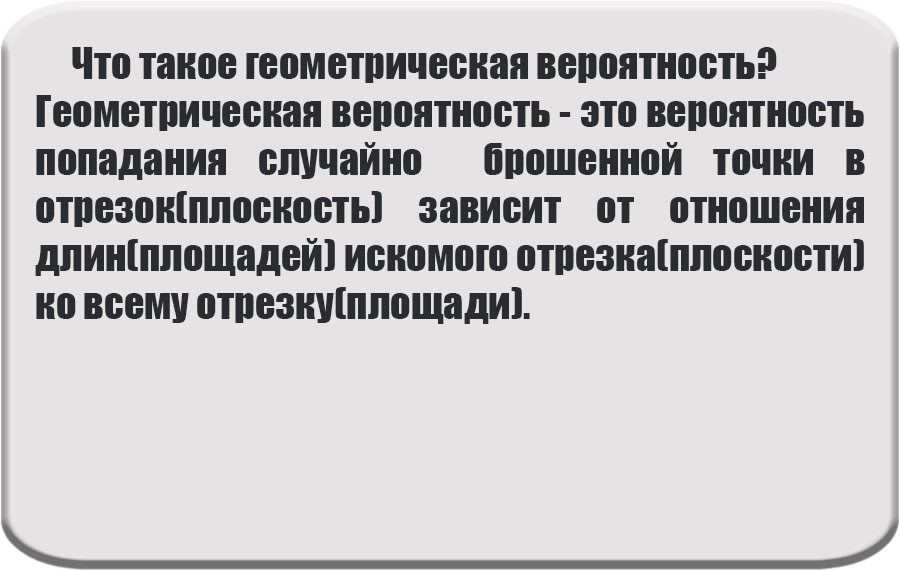
<style>
.page{position:relative;width:900px;height:570px;background:#e5e3e3}
.page>*{position:absolute;margin:0}
.t1{font:40px "Impact";color:#2a2c30}
</style>
<div class="page">
<p class="t1" style="left:35px;top:47px;width:830px;height:277px;text-align:justify">Что такое геометрическая вероятность? <br>Геометрическая вероятность - это вероятность попадания случайно  брошенной точки в отрезок(плоскость) зависит от отношения длин(площадей) искомого отрезка(плоскости) ко всему отрезку(площади).</p>
</div>
